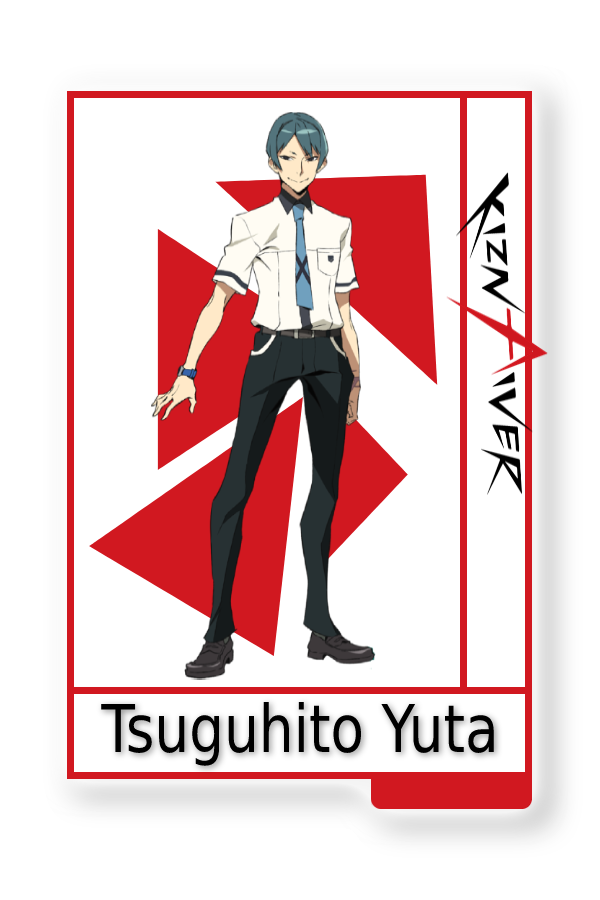
<style>
.page{position:relative;width:600px;height:900px;background:#ffffff}
.page>*{position:absolute;margin:0}
.t1{font:65.8px "CoolveticaRg-Regular";color:#000000;scale:0.84 1}
</style>
<div class="page">
<p class="t1" style="left:101px;top:702px;width:393px;height:64px">Tsuguhito Yuta</p>
</div>
